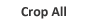
<style>
.page{position:relative;width:88px;height:23px;background:#ffffff}
.page>*{position:absolute;margin:0}
.t1{font:14px "Calibri-Bold";color:#363535}
</style>
<div class="page">
<p class="t1" style="left:21px;top:6px;width:45px;height:13px">Crop All</p>
</div>
